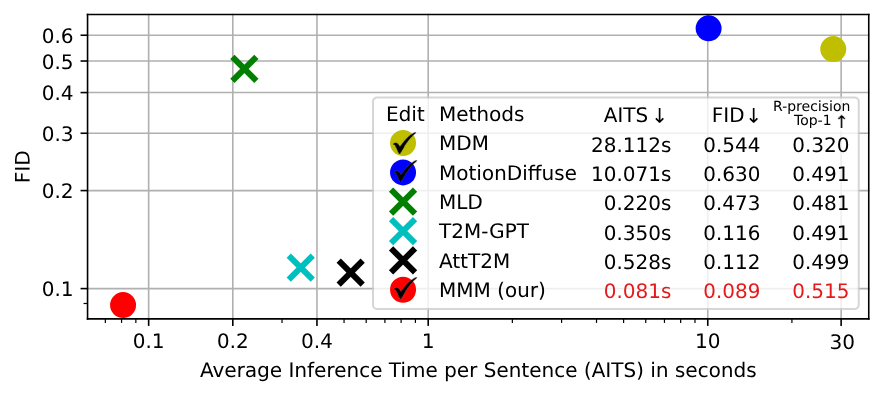
<style>
.page{position:relative;width:883px;height:394px;background:#ffffff}
.page>*{position:absolute;margin:0}
.t1{font:20px "DejaVuSans";color:#000000}
.t2{font:14px "DejaVuSans";color:#000000}
.t3{font:20px/29.3px "DejaVuSans";color:#000000}
.t4{font:20px/27.3px "DejaVuSans";color:#000000}
.t5{font:20px/29.3px "DejaVuSans";color:#e51919}
</style>
<div class="page">
<p class="t1" style="left:43px;top:28px;width:30px;height:16px">0.6</p>
<p class="t1" style="left:43px;top:54px;width:29px;height:16px">0.5</p>
<p class="t1" style="left:43px;top:85px;width:30px;height:16px">0.4</p>
<p class="t2" style="left:774px;top:100px;width:76px;height:14px">R-precision</p>
<p class="t1" style="left:387px;top:105px;width:38px;height:17px">Edit</p>
<p class="t3" style="left:438px;top:105px;width:138px;height:195px"><span class="t4">Methods</span><br>MDM<br>MotionDiffuse<br>MLD<br>T2M-GPT<br>AttT2M<br>MMM (our)</p>
<p class="t3" style="left:592px;top:107px;width:257px;height:192px"><span class="t4">  AITS          FID      </span><br>28.112s     0.544     0.320 <br>10.071s     0.630     0.491<br>  0.220s     0.473     0.481<br>  0.350s     0.116     0.491<br>  0.528s     0.112     0.499<br> <span class="t5"> 0.081s     0.089     0.515</span></p>
<p class="t1" style="left:43px;top:126px;width:29px;height:16px">0.3</p>
<p class="t2" style="left:793px;top:114px;width:38px;height:14px">Top-1</p>
<p class="t1" style="left:15px;top:151px;width:15px;height:31px;rotate:-90deg">FID</p>
<p class="t1" style="left:43px;top:183px;width:29px;height:16px">0.2</p>
<p class="t1" style="left:43px;top:281px;width:29px;height:16px">0.1</p>
<p class="t1" style="left:134px;top:333px;width:29px;height:16px">0.1</p>
<p class="t4" style="left:200px;top:334px;width:654px;height:48px;text-align:right"><span class="t1">30</span><br>Average Inference Time per Sentence (AITS) in seconds</p>
<p class="t1" style="left:218px;top:333px;width:29px;height:16px">0.2</p>
<p class="t1" style="left:302px;top:333px;width:30px;height:16px">0.4</p>
<p class="t1" style="left:424px;top:333px;width:9px;height:15px">1</p>
<p class="t1" style="left:697px;top:333px;width:23px;height:16px">10</p>
</div>
